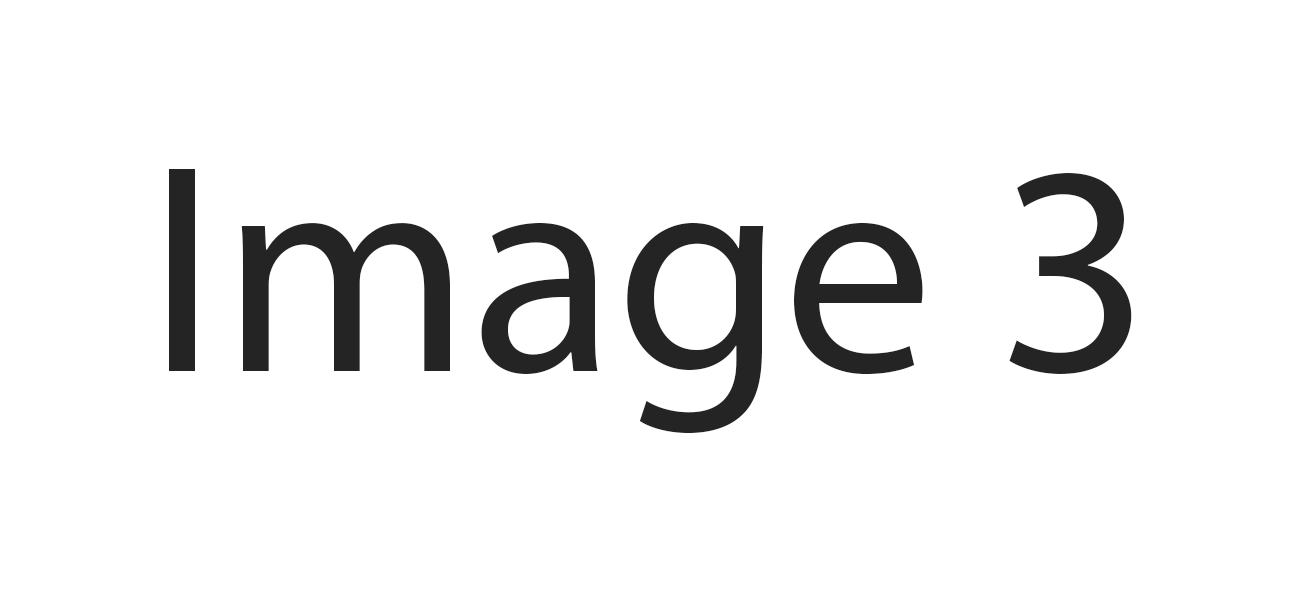
<style>
.page{position:relative;width:1300px;height:600px;background:#ffffff}
.page>*{position:absolute;margin:0}
.t1{font:300px "MyriadPro-Regular";color:#242424}
</style>
<div class="page">
<p class="t1" style="left:169px;top:169px;width:963px;height:264px">Image 3</p>
</div>
